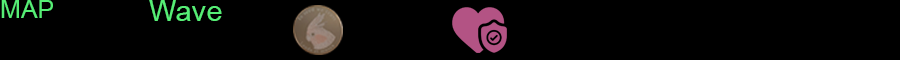
<style>
.page{position:relative;width:900px;height:60px;background:#000000}
.page>*{position:absolute;margin:0}
.t1{font:25px "ArialMT";color:#56ee75}
.t2{font:29.2px "ArialMT";color:#56ee75}
</style>
<div class="page">
<p class="t1" style="left:1px;top:0px;width:52px;height:18px">MAP</p>
<p class="t2" style="left:149px;top:0px;width:73px;height:21px">Wave</p>
</div>
